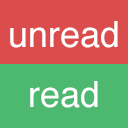
<style>
.page{position:relative;width:128px;height:128px;background:#4db870}
.page>*{position:absolute;margin:0}
.t1{font:36px "Helvetica";color:#ffffff}
</style>
<div class="page">
<p class="t1" style="left:10px;top:21px;width:108px;height:27px">unread</p>
<p class="t1" style="left:30px;top:81px;width:68px;height:27px">read</p>
</div>
